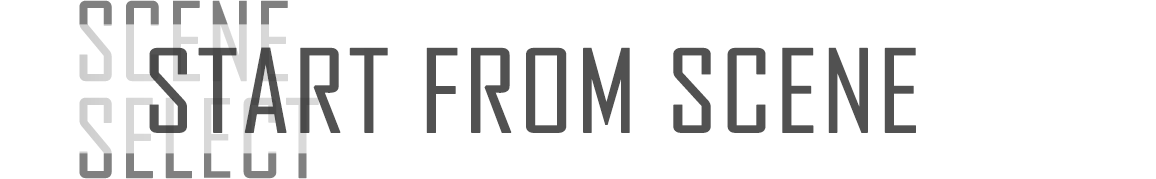
<style>
.page{position:relative;width:1156px;height:179px;background:#ffffff}
.page>*{position:absolute;margin:0}
.t1{font:104px/85px "AgencyFB-Reg";text-transform:uppercase;font-weight:bold}
.t2{font:110px "AgencyFB-Reg";color:#515151;text-transform:uppercase;font-weight:bold;scale:1.1 1}
</style>
<div class="page">
<p class="t1" style="left:79px;top:0px;width:240px;height:179px">scene<br>select</p>
<p class="t2" style="left:149px;top:47px;width:767px;height:86px">start from scene</p>
</div>
